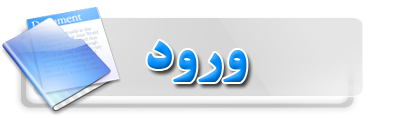
<style>
.page{position:relative;width:394px;height:118px;background:#ffffff}
.page>*{position:absolute;margin:0}
.t1{font:50px "BTitrBold";letter-spacing:-0.01em;text-transform:uppercase;scale:1.19 1}
</style>
<div class="page">
<p class="t1" style="left:147px;top:41px;width:100px;height:41px">ورود</p>
</div>
